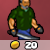
<style>
.page{position:relative;width:50px;height:50px}
.page>*{position:absolute;margin:0}
.t1{font:10px "MFWenYan_Noncommercial-Regular";letter-spacing:-0.06em;color:#ffffff}
</style>
<div class="page">
<p class="t1" style="left:25px;top:42px;width:12px;height:7px">20</p>
</div>
